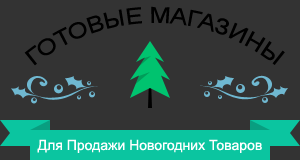
<style>
.page{position:relative;width:300px;height:160px;background:#333333}
.page>*{position:absolute;margin:0}
.t1{font:22px "ArialMT";color:#000000}
.t2{font:14px "ArialMT";color:#ffffff}
</style>
<div class="page">
<p class="t1" style="left:24px;top:6px;width:261px;height:60px;text-align:center">ГОТОВЫЕ МАГАЗИНЫ</p>
<p class="t2" style="left:37px;top:139px;width:225px;height:14px">Для Продажи Новогодних Товаров</p>
</div>
